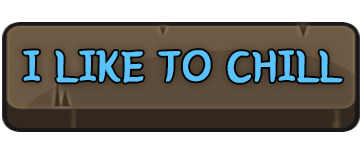
<style>
.page{position:relative;width:360px;height:150px;background:#ffffff}
.page>*{position:absolute;margin:0}
.t1{font:45.8px "BMYEONSUNG";color:#5ac3fc;text-transform:uppercase;font-weight:bold}
</style>
<div class="page">
<p class="t1" style="left:23px;top:50px;width:320px;height:33px">I LIKE TO CHILL</p>
</div>
